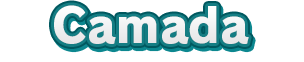
<style>
.page{position:relative;width:304px;height:62px;background:#ffffff}
.page>*{position:absolute;margin:0}
.t1{font:46.9px "RodinPro-EB";letter-spacing:0.002em;color:#efeff0}
</style>
<div class="page">
<p class="t1" style="left:54px;top:5px;width:195px;height:39px">Camada</p>
</div>
